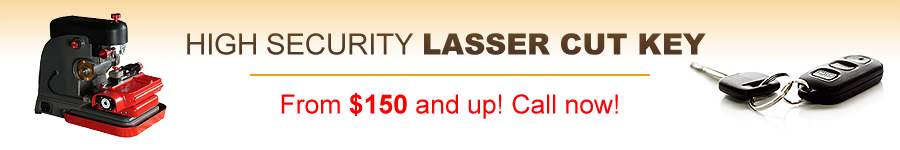
<style>
.page{position:relative;width:900px;height:150px;background:#ffffff}
.page>*{position:absolute;margin:0}
.t1{font:29.2px "Arial-Black";color:#493227}
.t2{font:29.2px "ArialMT";color:#493227}
.t3{font:26.6px "ArialMT";color:#ff0000}
.t4{font:26.6px "Arial-BoldMT";color:#ff0000}
</style>
<div class="page">
<p class="t1" style="left:187px;top:33px;width:519px;height:22px"><span class="t2">HIGH SECURITY </span>LASSER CUT KEY</p>
<p class="t3" style="left:281px;top:93px;width:337px;height:26px">From <span class="t4">$150 </span>and up! Call now!</p>
</div>
